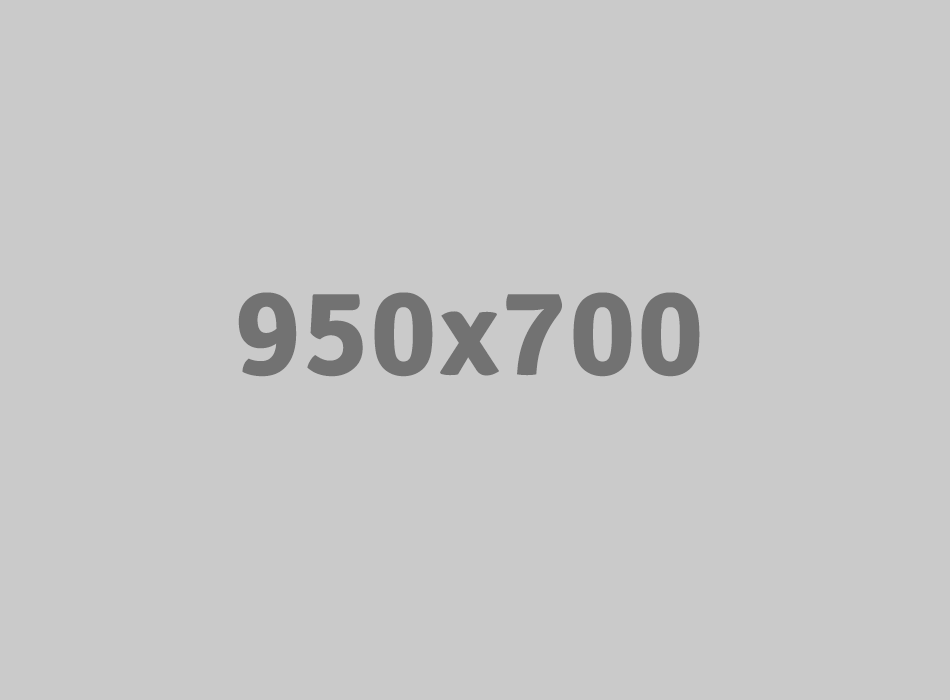
<style>
.page{position:relative;width:950px;height:700px;background:#cacaca}
.page>*{position:absolute;margin:0}
.t1{font:122.5px "SignikaNegative-Bold";color:#727272;font-weight:bold}
</style>
<div class="page">
<p class="t1" style="left:238px;top:292px;width:462px;height:85px">950x700</p>
</div>
